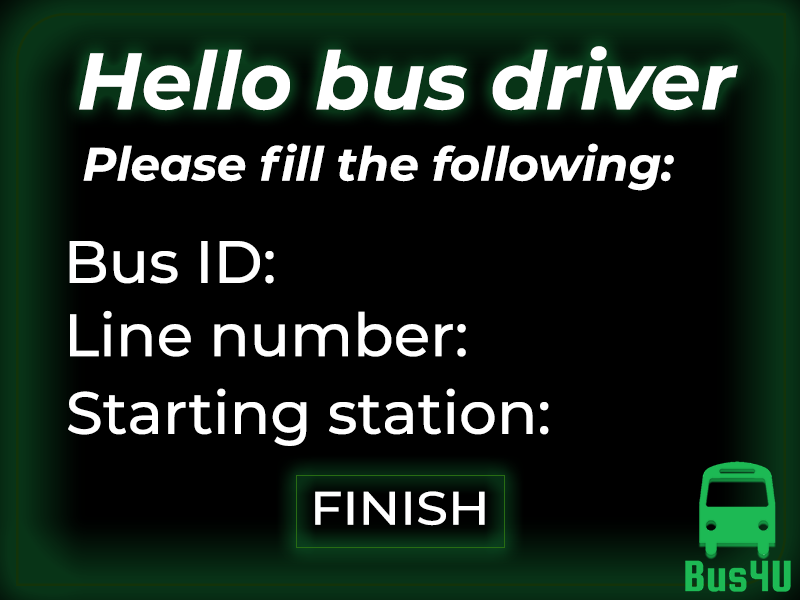
<style>
.page{position:relative;width:800px;height:600px;background:#000000}
.page>*{position:absolute;margin:0}
.t1{font:80px "Montserrat-BoldItalic";color:#ffffff}
.t2{font:46.7px "Montserrat-BoldItalic";color:#ffffff}
.t3{font:59.6px "Montserrat-Medium";color:#ffffff}
.t4{font:46.7px "Montserrat-Medium";color:#ffffff;scale:1.1 1}
</style>
<div class="page">
<p class="t1" style="left:79px;top:46px;width:659px;height:65px">Hello bus driver</p>
<p class="t2" style="left:83px;top:143px;width:591px;height:48px">Please fill the following: fields</p>
<p class="t3" style="left:69px;top:241px;width:205px;height:43px">Bus ID:</p>
<p class="t3" style="left:70px;top:310px;width:396px;height:47px">Line number:</p>
<p class="t3" style="left:68px;top:388px;width:481px;height:58px">Starting station:</p>
<p class="t4" style="left:315px;top:491px;width:170px;height:35px">FINISH</p>
</div>
